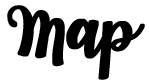
<style>
.page{position:relative;width:149px;height:84px;background:#ffffff}
.page>*{position:absolute;margin:0}
.t1{font:72px "SOV_Thanamas";letter-spacing:-0.025em;color:#000000;font-weight:bold}
</style>
<div class="page">
<p class="t1" style="left:7px;top:5px;width:138px;height:75px">Map</p>
</div>
